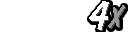
<style>
.page{position:relative;width:128px;height:32px;background:#ffffff}
.page>*{position:absolute;margin:0}
.t1{font:43px "DomDiagonalBT-Regular";letter-spacing:0.075em;color:#ffffff;scale:1.05 1}
.t2{font:29.7px "DomDiagonalBT-Regular";letter-spacing:0.075em;color:#969696}
</style>
<div class="page">
<p class="t1" style="left:89px;top:1px;width:20px;height:29px">4</p>
<p class="t1" style="left:90px;top:2px;width:20px;height:29px">4</p>
<p class="t2" style="left:108px;top:5px;width:17px;height:23px">X</p>
</div>
